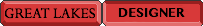
<style>
.page{position:relative;width:203px;height:26px;background:#d83939}
.page>*{position:absolute;margin:0}
.t1{font:16px "Perpetua";color:#000000}
.t2{font:12px "MyanmarMN-Bold";color:#000000}
</style>
<div class="page">
<p class="t1" style="left:4px;top:8px;width:92px;height:11px">GREAT LAKES</p>
<p class="t2" style="left:118px;top:7px;width:67px;height:11px">DESIGNER</p>
</div>
